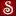
<style>
.page{position:relative;width:16px;height:16px;background:#990000}
.page>*{position:absolute;margin:0}
.t1{font:17.6px "Harrington";color:#ffffff}
</style>
<div class="page">
<p class="t1" style="left:3px;top:1px;width:10px;height:14px">S</p>
</div>
